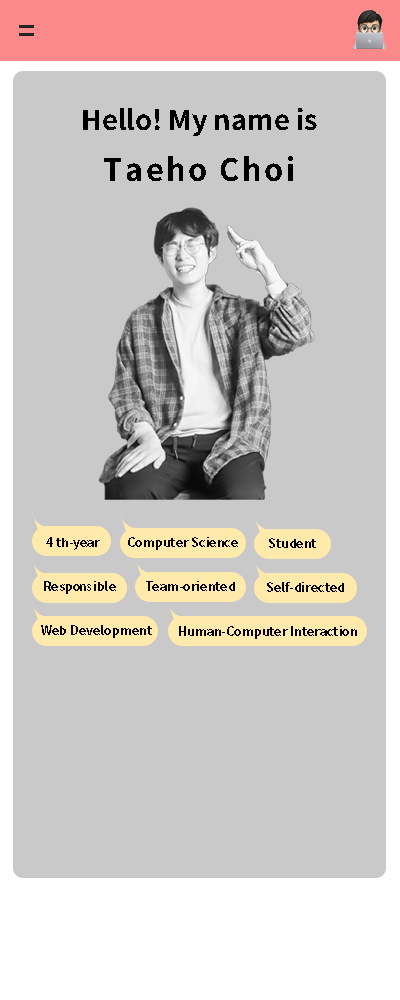
<style>
.page{position:relative;width:400px;height:1000px;background:#c9c9c9}
.page>*{position:absolute;margin:0}
.t1{font:30px "NotoSansCJKkr-Bold";letter-spacing:0.08em;color:#242424}
.t2{font:27.3px "NotoSansCJKkr-Bold";color:#000000}
.t3{font:30.8px "NotoSansCJKkr-Bold";letter-spacing:0.08em;color:#000000}
.t4{font:12.5px "NotoSansCJKkr-Bold";color:#000000}
</style>
<div class="page">
<p class="t1" style="left:19px;top:25px;width:15px;height:11px">=</p>
<p class="t2" style="left:83px;top:108px;width:234px;height:73px;text-align:center">Hello! My name is   <br><span class="t3">Taeho Choi</span></p>
<p class="t4" style="left:46px;top:537px;width:54px;height:13px">4 th-year</p>
<p class="t4" style="left:128px;top:537px;width:110px;height:13px">Computer Science</p>
<p class="t4" style="left:269px;top:538px;width:47px;height:10px">Student</p>
<p class="t4" style="left:44px;top:581px;width:72px;height:13px">Responsible</p>
<p class="t4" style="left:146px;top:581px;width:89px;height:10px">Team-oriented</p>
<p class="t4" style="left:267px;top:582px;width:77px;height:10px">Self-directed</p>
<p class="t4" style="left:41px;top:625px;width:111px;height:13px">Web Development</p>
<p class="t4" style="left:179px;top:626px;width:178px;height:13px">Human-Computer Interaction</p>
</div>
